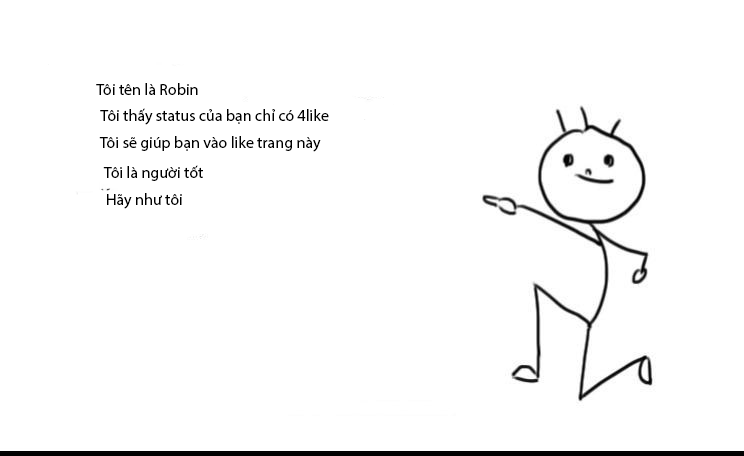
<style>
.page{position:relative;width:744px;height:456px;background:#ffffff}
.page>*{position:absolute;margin:0}
.t1{font:12px "MyriadPro-Regular";color:#000000}
</style>
<div class="page">
<p class="t1" style="left:96px;top:83px;width:102px;height:12px">Tôi tên là Robin</p>
<p class="t1" style="left:100px;top:108px;width:229px;height:17px">Tôi thấy status của bạn chỉ có 4like</p>
<p class="t1" style="left:99px;top:136px;width:222px;height:16px">Tôi sẽ giúp bạn vào like trang này</p>
<p class="t1" style="left:103px;top:165px;width:100px;height:16px">Tôi là người tốt</p>
<p class="t1" style="left:107px;top:193px;width:75px;height:16px">Hãy như tôi</p>
</div>
